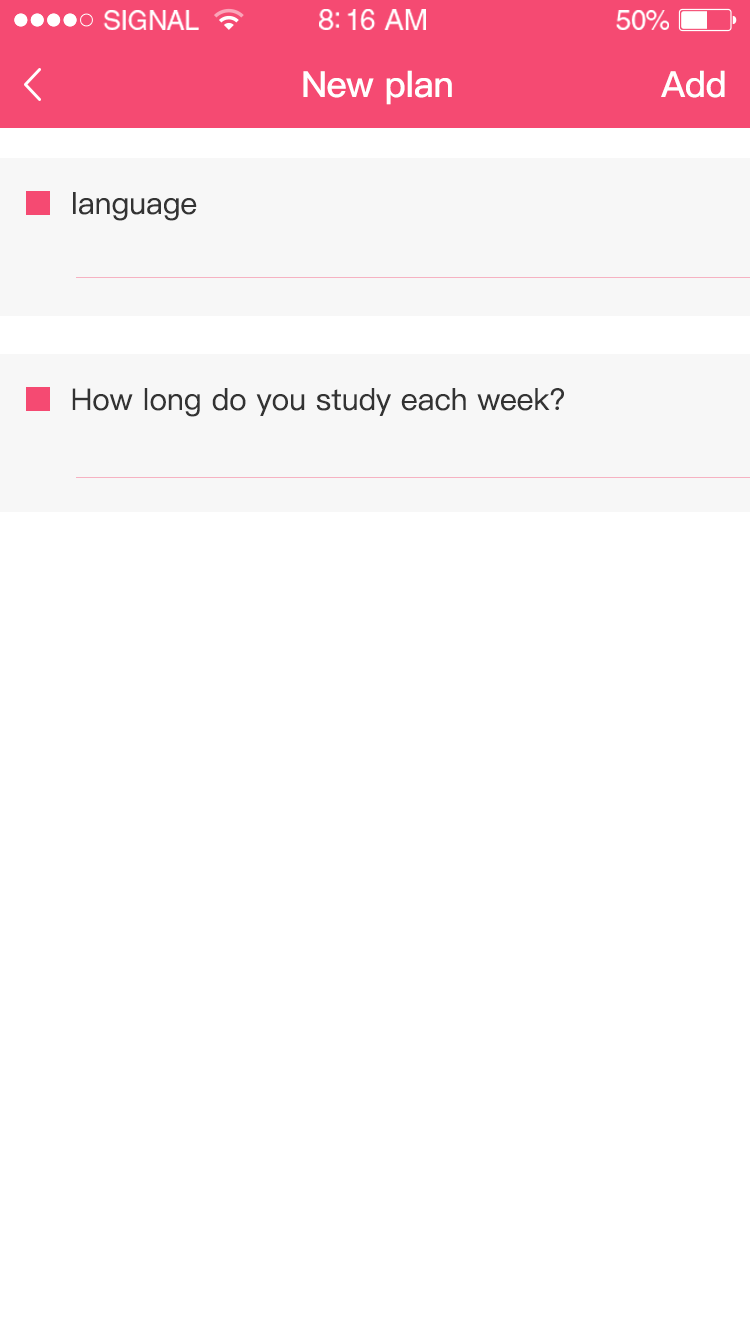
<style>
.page{position:relative;width:750px;height:1334px;background:#ffffff}
.page>*{position:absolute;margin:0}
.t1{font:26.9px "HelveticaLTStd-Roman";letter-spacing:-0.02em;color:#ffffff}
.t2{font:29.3px "HelveticaLTStd-Roman";letter-spacing:-0.02em;color:#ffffff}
.t3{font:28.1px "HelveticaLTStd-Roman";letter-spacing:-0.02em;color:#ffffff}
.t4{font:36px "PingFang-SC-Bold";letter-spacing:-0.02em;color:#ffffff}
.t5{font:30px "PingFang-SC-Medium";color:#333333}
</style>
<div class="page">
<p class="t1" style="left:103px;top:10px;width:96px;height:20px">SIGNAL</p>
<p class="t2" style="left:319px;top:9px;width:107px;height:21px">8:16 AM</p>
<p class="t3" style="left:616px;top:10px;width:53px;height:20px">50%</p>
<p class="t4" style="left:303px;top:70px;width:149px;height:35px">New plan</p>
<p class="t4" style="left:661px;top:70px;width:64px;height:28px">Add</p>
<p class="t5" style="left:73px;top:192px;width:124px;height:29px">language</p>
<p class="t5" style="left:72px;top:388px;width:492px;height:29px">How long do you study each week?</p>
</div>
